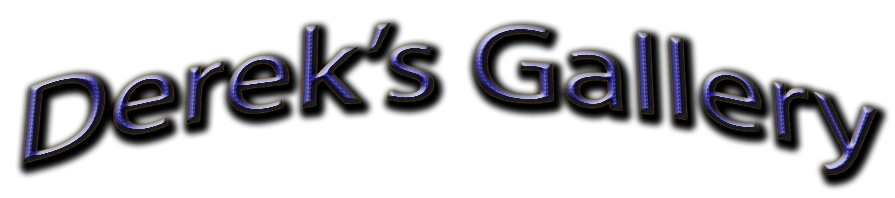
<style>
.page{position:relative;width:895px;height:198px;background:#ffffff}
.page>*{position:absolute;margin:0}
.t1{font:125px "MyriadPro-Regular"}
.t2{font:72px "MyriadPro-Regular"}
</style>
<div class="page">
<p class="t1" style="left:23px;top:23px;width:854px;height:152px"><span class="t2"><br></span>Derek’s Gallery</p>
</div>
